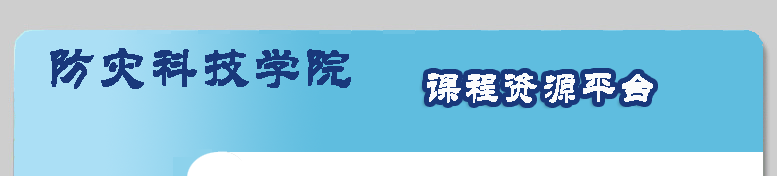
<style>
.page{position:relative;width:777px;height:176px;background:#5fbddf}
.page>*{position:absolute;margin:0}
.t1{font:55.7px "STLiti";letter-spacing:0.05em;color:#19387b;font-weight:bold;scale:0.86 1}
.t2{font:41.8px "STLiti";letter-spacing:0.05em;color:#fafbfc;font-weight:bold;scale:0.86 1}
</style>
<div class="page">
<p class="t1" style="left:50px;top:48px;width:301px;height:41px">防灾科技学院</p>
<p class="t2" style="left:427px;top:73px;width:226px;height:30px">课程资源平台</p>
</div>
